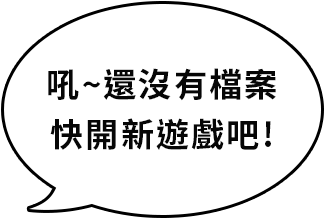
<style>
.page{position:relative;width:325px;height:219px;background:#ffffff}
.page>*{position:absolute;margin:0}
.t1{font:33.3px/50px "NotoSansCJKtc-Bold";letter-spacing:0.06em;color:#060606}
</style>
<div class="page">
<p class="t1" style="left:48px;top:68px;width:228px;height:82px;text-align:center">吼~還沒有檔案<br>快開新遊戲吧!</p>
</div>
